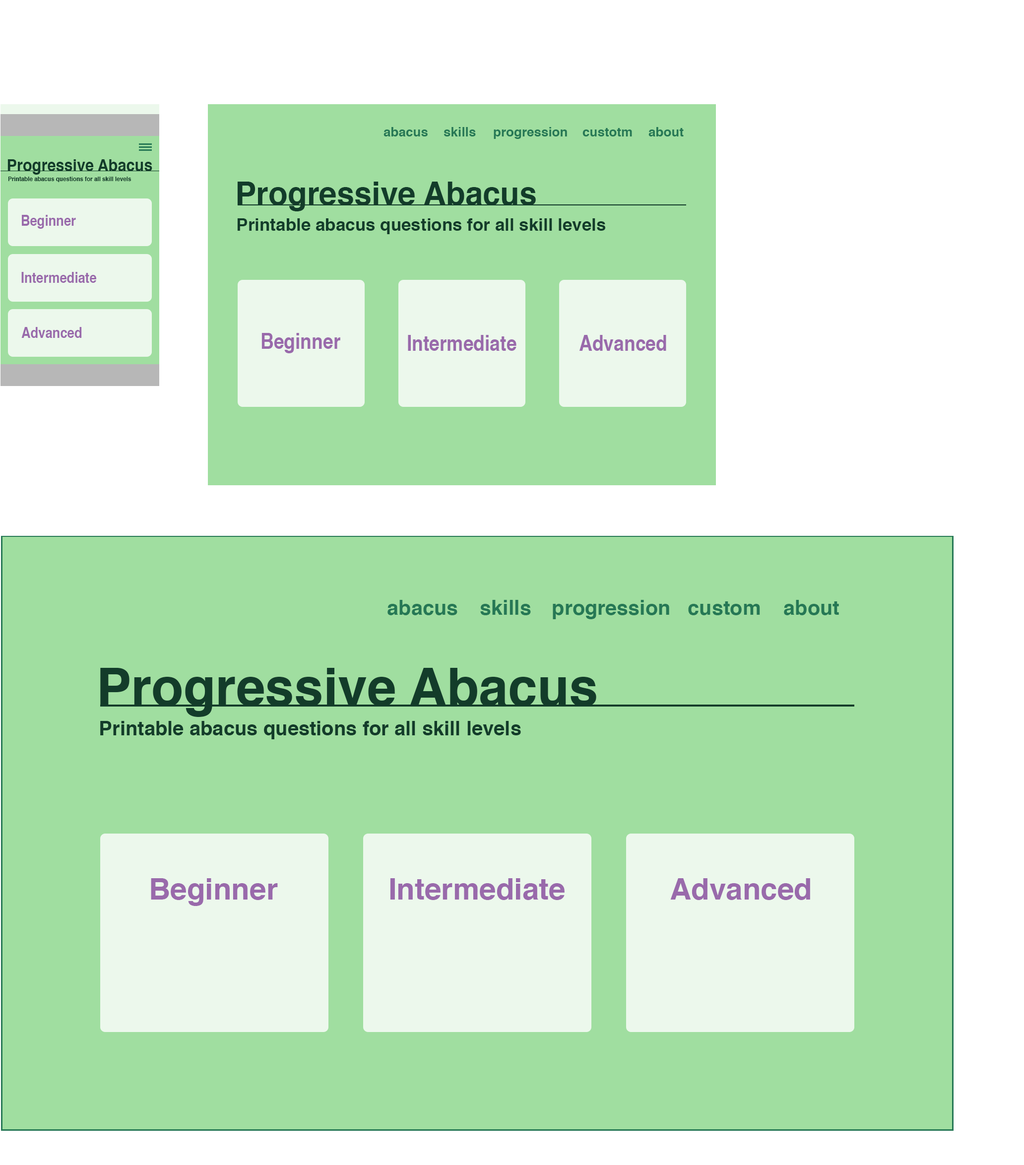
<style>
.page{position:relative;width:1024px;height:1165px;background:#a0dea0}
.page>*{position:absolute;margin:0}
.t1{font:12.9px "Helvetica-Bold";color:#267855}
.t2{font:16.8px "Helvetica-Bold";color:#133c2a;scale:0.9 1}
.t3{font:6px "Helvetica-Bold";color:#133c2a}
.t4{font:32.1px "Helvetica-Bold";color:#133c2a}
.t5{font:14.9px "Helvetica-Bold";color:#996aab;scale:0.86 1}
.t6{font:17.4px "Helvetica-Bold";color:#133c2a}
.t7{font:21.6px "Helvetica-Bold";color:#996aab;scale:0.86 1}
.t8{font:20.5px "Helvetica-Bold";color:#267855}
.t9{font:52.4px "Helvetica-Bold";color:#133c2a}
.t10{font:19.8px "Helvetica-Bold";color:#133c2a}
.t11{font:29.8px "Helvetica-Bold";color:#996aab}
</style>
<div class="page">
<p class="t1" style="left:383px;top:127px;width:45px;height:9px">abacus</p>
<p class="t1" style="left:443px;top:127px;width:33px;height:9px">skills</p>
<p class="t1" style="left:494px;top:127px;width:73px;height:12px">progression</p>
<p class="t1" style="left:582px;top:128px;width:50px;height:8px">custotm</p>
<p class="t1" style="left:648px;top:127px;width:36px;height:9px">about</p>
<p class="t2" style="left:7px;top:159px;width:145px;height:16px">Progressive Abacus</p>
<p class="t3" style="left:8px;top:177px;width:123px;height:5px">Printable abacus questions for all skill levels</p>
<p class="t4" style="left:237px;top:182px;width:299px;height:29px">Progressive Abacus</p>
<p class="t5" style="left:22px;top:215px;width:54px;height:14px">Beginner</p>
<p class="t6" style="left:237px;top:218px;width:368px;height:16px">Printable abacus questions for all skill levels</p>
<p class="t5" style="left:21px;top:272px;width:75px;height:11px">Intermediate</p>
<p class="t5" style="left:21px;top:327px;width:61px;height:11px">Advanced</p>
<p class="t7" style="left:261px;top:333px;width:79px;height:20px">Beginner</p>
<p class="t7" style="left:408px;top:335px;width:108px;height:16px">Intermediate</p>
<p class="t7" style="left:579px;top:335px;width:87px;height:16px">Advanced</p>
<p class="t8" style="left:387px;top:600px;width:70px;height:15px">abacus</p>
<p class="t8" style="left:480px;top:600px;width:51px;height:15px">skills</p>
<p class="t8" style="left:553px;top:600px;width:116px;height:19px">progression</p>
<p class="t8" style="left:688px;top:601px;width:72px;height:14px">custom</p>
<p class="t8" style="left:784px;top:600px;width:55px;height:15px">about</p>
<p class="t9" style="left:100px;top:668px;width:496px;height:49px">Progressive Abacus</p>
<p class="t10" style="left:100px;top:721px;width:421px;height:18px">Printable abacus questions for all skill levels</p>
<p class="t11" style="left:151px;top:878px;width:127px;height:28px">Beginner</p>
<p class="t11" style="left:390px;top:878px;width:174px;height:22px">Intermediate</p>
<p class="t11" style="left:670px;top:878px;width:140px;height:22px">Advanced</p>
</div>
